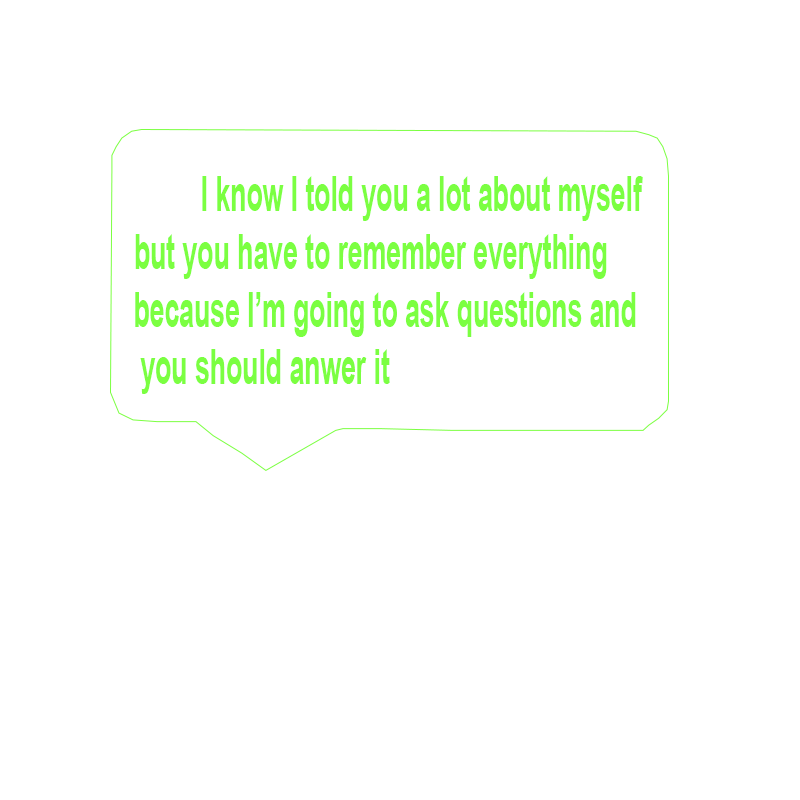
<style>
.page{position:relative;width:800px;height:800px;background:#ffffff}
.page>*{position:absolute;margin:0}
.t1{font:48px "Arial-BoldMT";color:#7bff41;scale:0.55 1}
.t2{font:59.2px "MicrosoftYaHei-Bold";color:#7bff41;scale:0.55 1}
</style>
<div class="page">
<p class="t1" style="left:135px;top:176px;width:508px;height:218px"><span class="t2"><br></span>         I know I told you a lot about myself but you have to remember everything  because I’m going to ask questions and you should anwer it</p>
</div>
